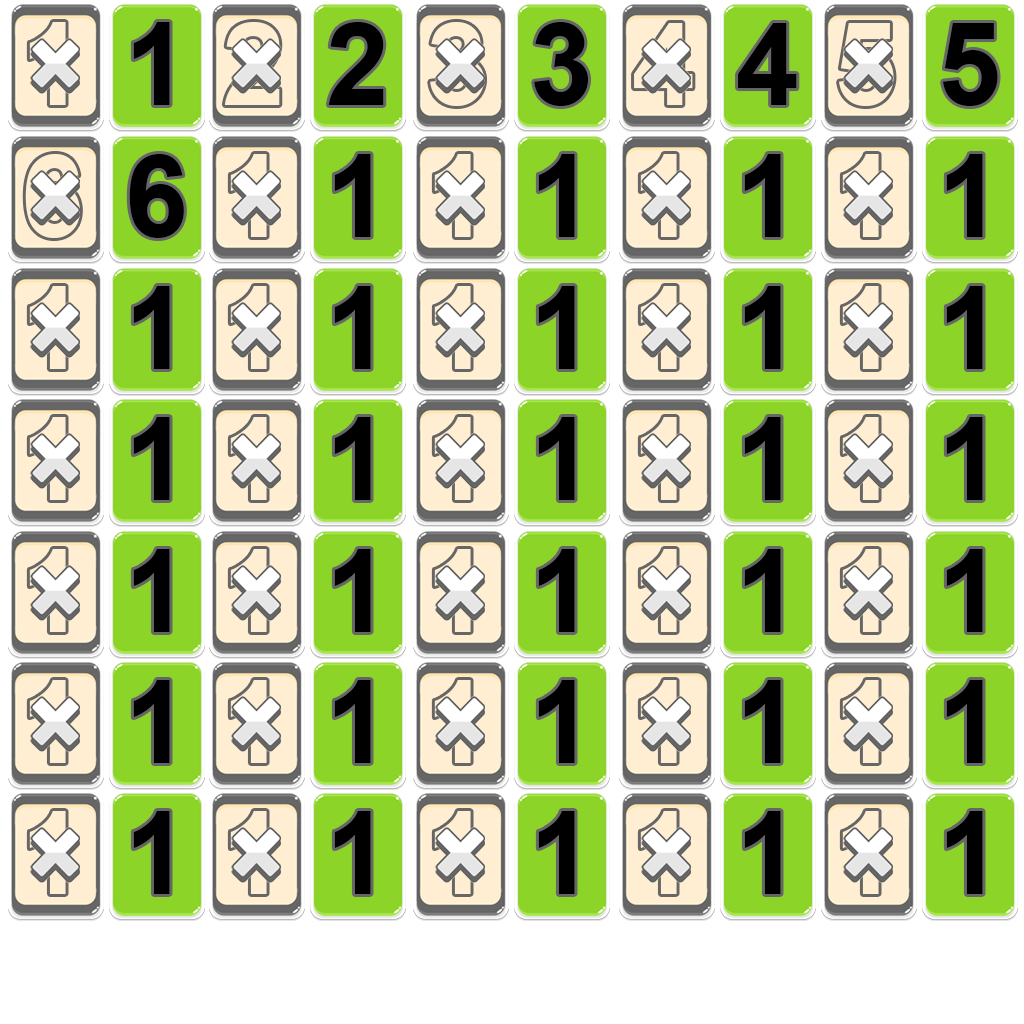
<style>
.page{position:relative;width:1024px;height:1024px;background:#ffffff}
.page>*{position:absolute;margin:0}
.t1{font:114.6px "Arial-BoldMT";color:#000000}
</style>
<div class="page">
<p class="t1" style="left:133px;top:22px;width:37px;height:83px">1</p>
<p class="t1" style="left:328px;top:22px;width:56px;height:83px">2</p>
<p class="t1" style="left:534px;top:22px;width:54px;height:84px">3</p>
<p class="t1" style="left:738px;top:23px;width:59px;height:82px">4</p>
<p class="t1" style="left:943px;top:23px;width:55px;height:83px">5</p>
<p class="t1" style="left:129px;top:154px;width:55px;height:84px">6</p>
<p class="t1" style="left:334px;top:154px;width:37px;height:83px">1</p>
<p class="t1" style="left:538px;top:154px;width:37px;height:83px">1</p>
<p class="t1" style="left:744px;top:154px;width:37px;height:83px">1</p>
<p class="t1" style="left:946px;top:154px;width:37px;height:83px">1</p>
<p class="t1" style="left:133px;top:286px;width:37px;height:83px">1</p>
<p class="t1" style="left:334px;top:286px;width:37px;height:83px">1</p>
<p class="t1" style="left:538px;top:286px;width:37px;height:83px">1</p>
<p class="t1" style="left:744px;top:286px;width:37px;height:83px">1</p>
<p class="t1" style="left:946px;top:286px;width:37px;height:83px">1</p>
<p class="t1" style="left:133px;top:417px;width:37px;height:83px">1</p>
<p class="t1" style="left:334px;top:417px;width:37px;height:83px">1</p>
<p class="t1" style="left:538px;top:417px;width:37px;height:83px">1</p>
<p class="t1" style="left:744px;top:417px;width:37px;height:83px">1</p>
<p class="t1" style="left:946px;top:417px;width:37px;height:83px">1</p>
<p class="t1" style="left:133px;top:549px;width:37px;height:83px">1</p>
<p class="t1" style="left:334px;top:549px;width:37px;height:83px">1</p>
<p class="t1" style="left:538px;top:549px;width:37px;height:83px">1</p>
<p class="t1" style="left:744px;top:549px;width:37px;height:83px">1</p>
<p class="t1" style="left:946px;top:549px;width:37px;height:83px">1</p>
<p class="t1" style="left:133px;top:680px;width:37px;height:83px">1</p>
<p class="t1" style="left:334px;top:680px;width:37px;height:83px">1</p>
<p class="t1" style="left:538px;top:680px;width:37px;height:83px">1</p>
<p class="t1" style="left:744px;top:680px;width:37px;height:83px">1</p>
<p class="t1" style="left:946px;top:680px;width:37px;height:83px">1</p>
<p class="t1" style="left:133px;top:811px;width:37px;height:83px">1</p>
<p class="t1" style="left:334px;top:811px;width:37px;height:83px">1</p>
<p class="t1" style="left:538px;top:811px;width:37px;height:83px">1</p>
<p class="t1" style="left:744px;top:811px;width:37px;height:83px">1</p>
<p class="t1" style="left:946px;top:811px;width:37px;height:83px">1</p>
</div>
